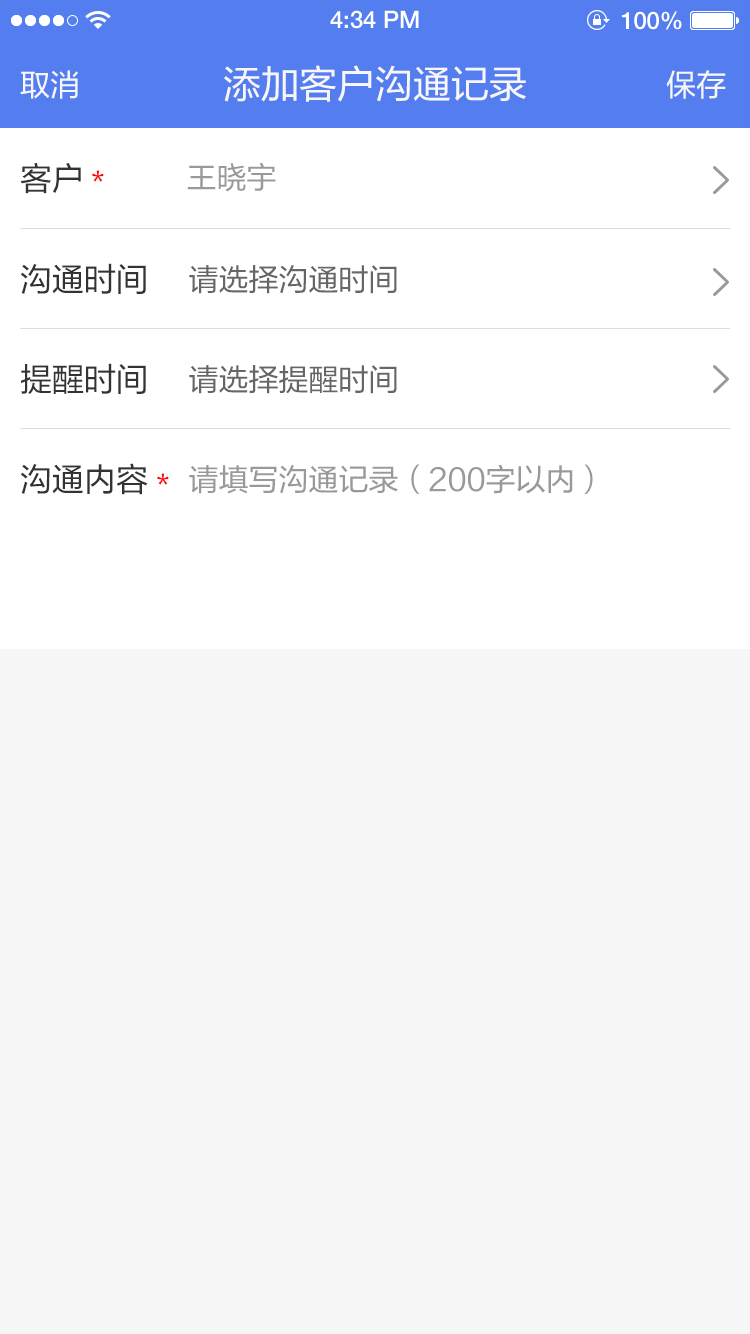
<style>
.page{position:relative;width:750px;height:1334px;background:#f7f7f7}
.page>*{position:absolute;margin:0}
.t1{font:24px "HelveticaNeueLTPro-Md";color:#ffffff}
.t2{font:38px "FZLTHJW-GB1-0";color:#f7f7f7}
.t3{font:30px "FZLTHJW-GB1-0";color:#f7f7f7}
.t4{font:32px "FZLTHJW-GB1-0";color:#333333}
.t5{font:30px "FZLTHJW-GB1-0";color:#ff0000}
.t6{font:30px "FZLTHJW-GB1-0";color:#999999}
.t7{font:30px "FZLTHJW-GB1-0";color:#666666}
</style>
<div class="page">
<p class="t1" style="left:330px;top:10px;width:89px;height:19px">4:34 PM</p>
<p class="t1" style="left:622px;top:11px;width:60px;height:19px">100%</p>
<p class="t2" style="left:224px;top:65px;width:302px;height:37px">添加客户沟通记录</p>
<p class="t3" style="left:20px;top:70px;width:58px;height:29px">取消</p>
<p class="t3" style="left:666px;top:70px;width:60px;height:29px">保存</p>
<p class="t4" style="left:20px;top:163px;width:61px;height:31px">客户</p>
<p class="t5" style="left:92px;top:170px;width:12px;height:12px">*</p>
<p class="t6" style="left:187px;top:162px;width:89px;height:30px">王晓宇</p>
<p class="t4" style="left:20px;top:263px;width:126px;height:31px">沟通时间</p>
<p class="t7" style="left:189px;top:265px;width:208px;height:29px">请选择沟通时间</p>
<p class="t4" style="left:20px;top:363px;width:126px;height:31px">提醒时间</p>
<p class="t7" style="left:189px;top:365px;width:208px;height:29px">请选择提醒时间</p>
<p class="t4" style="left:20px;top:463px;width:128px;height:32px">沟通内容</p>
<p class="t5" style="left:157px;top:473px;width:12px;height:12px">*</p>
<p class="t6" style="left:189px;top:464px;width:404px;height:30px">请填写沟通记录（200字以内）</p>
</div>
